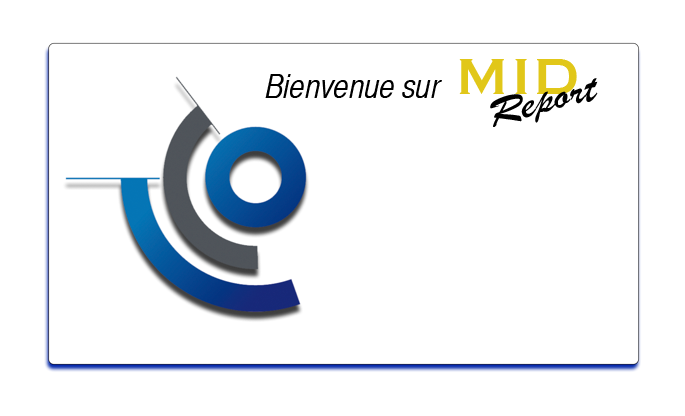
<style>
.page{position:relative;width:685px;height:416px;background:#ffffff}
.page>*{position:absolute;margin:0}
.t1{font:66.7px "Copperplate";color:#e1c719}
.t2{font:33.3px "HelveticaCYOblique";color:#000000}
.t3{font:41.5px "BrushScriptMT";color:#000000;scale:1.21 1}
</style>
<div class="page">
<p class="t1" style="left:459px;top:59px;width:118px;height:35px">MID</p>
<p class="t2" style="left:265px;top:74px;width:177px;height:24px">Bienvenue sur</p>
<p class="t3" style="left:490px;top:78px;width:108px;height:49px;rotate:-15deg">Report</p>
</div>
